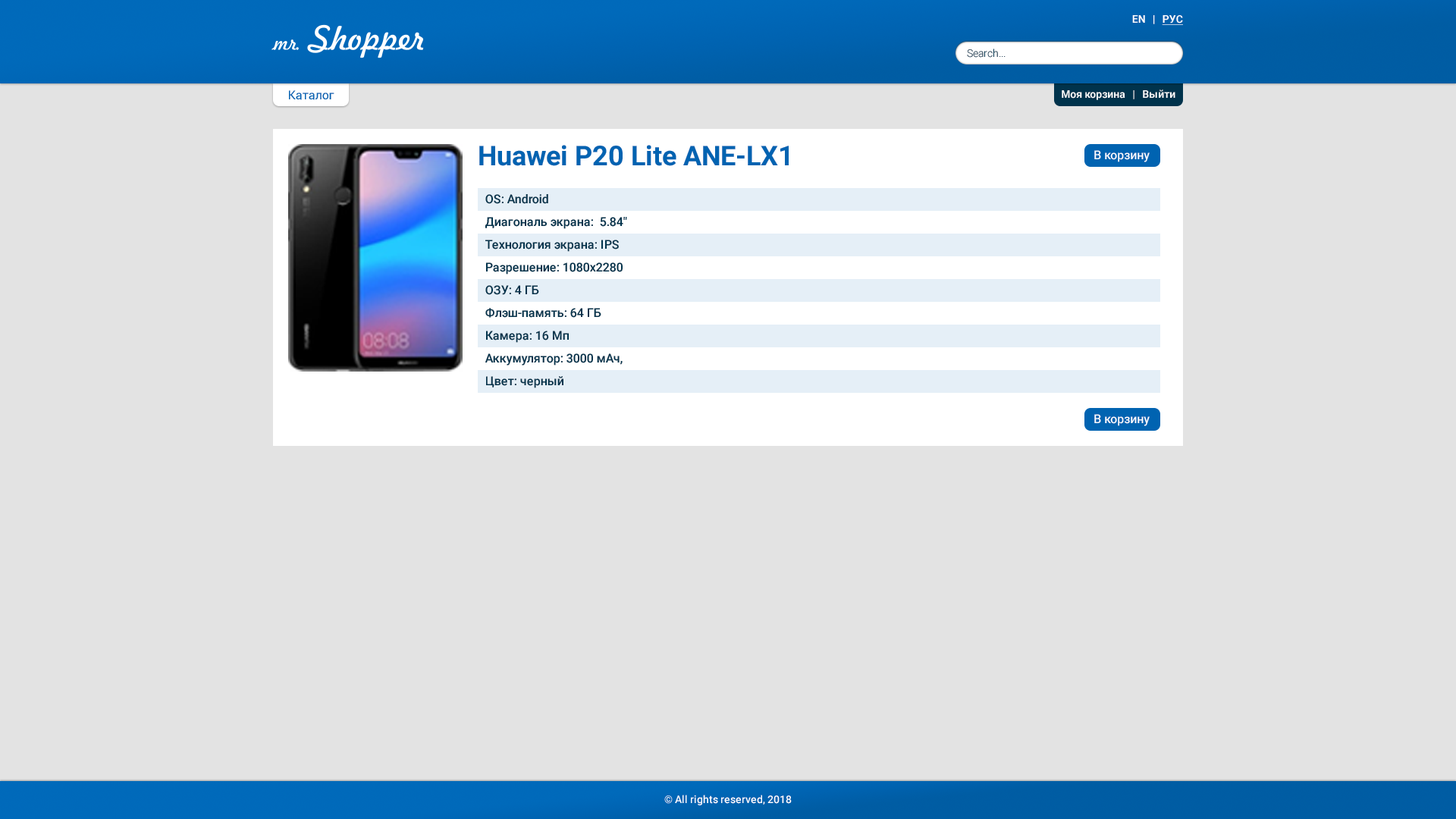
<style>
.page{position:relative;width:1456px;height:819px;background:#e3e3e3}
.page>*{position:absolute;margin:0}
.t1{font:10.6px "Roboto-Bold";color:#ffffff}
.t2{font:10.6px "Roboto-Bold";color:#ffffff;text-decoration:underline}
.t3{font:10.6px "Roboto-Light";color:#00334d}
.t4{font:12.1px "Roboto-Regular";color:#0063b1}
.t5{font:27.3px "Roboto-Bold";color:#0063b1}
.t6{font:12.1px "Roboto-Medium";color:#ffffff}
.t7{font:12.1px/22.7px "Roboto-Medium";color:#00334c}
.t8{font:10.6px "Roboto-Medium";color:#ffffff}
</style>
<div class="page">
<p class="t1" style="left:1132px;top:15px;width:51px;height:10px">EN   |   <span class="t2">РУС</span></p>
<p class="t3" style="left:967px;top:49px;width:39px;height:9px">Search...</p>
<p class="t1" style="left:1062px;top:89px;width:113px;height:11px">Моя корзина   |   Выйти</p>
<p class="t4" style="left:289px;top:90px;width:45px;height:10px">Каталог</p>
<p class="t5" style="left:479px;top:145px;width:310px;height:21px">Huawei P20 Lite ANE-LX1</p>
<p class="t6" style="left:1094px;top:150px;width:56px;height:12px">В корзину</p>
<p class="t7" style="left:485px;top:194px;width:142px;height:194px">OS: Android<br>Диагональ экрана:  5.84" <br>Технология экрана: IPS<br>Разрешение: 1080x2280<br>ОЗУ: 4 ГБ<br>Флэш-память: 64 ГБ<br>Камера: 16 Мп<br>Аккумулятор: 3000 мАч,<br>Цвет: черный</p>
<p class="t6" style="left:1094px;top:414px;width:56px;height:12px">В корзину</p>
<p class="t8" style="left:664px;top:795px;width:128px;height:10px">© All rights reserved, 2018</p>
</div>
